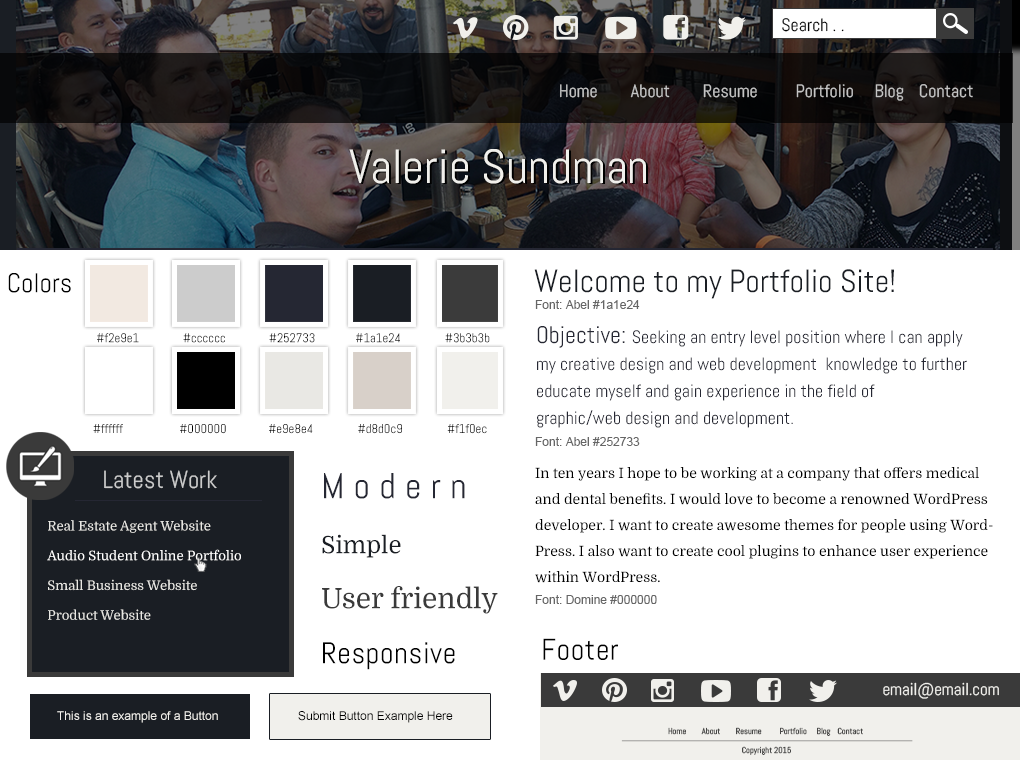
<style>
.page{position:relative;width:1020px;height:760px;background:#ffffff}
.page>*{position:absolute;margin:0}
.t1{font:18px "Abel-Regular";color:#010101}
.t2{font:18px "Abel-Regular";color:#cccccc}
.t3{font:48px "Abel-Regular";color:#f1f0ec}
.t4{font:32px "Abel-Regular";color:#1a1e24}
.t5{font:27.2px "Abel-Regular";color:#000000}
.t6{font:12px "ArialMT";color:#666666}
.t7{font:18px/27px "Abel-Regular";color:#252733}
.t8{font:24px/27px "Abel-Regular";color:#252733}
.t9{font:12.7px "Abel-Regular";color:#000000}
.t10{font:24.7px "Abel-Regular";color:#cccccc}
.t11{font:28px/55px "Domine-Regular";color:#3a3a3a}
.t12{font:36px/55px "Abel-Regular";letter-spacing:0.26em;color:#252733}
.t13{font:24px/55px "Domine-Regular";color:#1a1e24}
.t14{font:30px/55px "Abel-Regular";letter-spacing:0.02em;color:#000000}
.t15{font:14px/26px "Domine-Regular";color:#000000}
.t16{font:13.2px/14.8px "Domine-Regular";color:#e9e8e4}
.t17{font:13.2px/14.8px "Domine-Regular";color:#ffffff}
.t18{font:30px "Abel-Regular";letter-spacing:0.02em;color:#000000}
.t19{font:16.9px "Abel-Regular";color:#f1f0ec}
.t20{font:12px "ArialMT";color:#f1f0ec}
.t21{font:12px "ArialMT";color:#000000}
.t22{font:8.5px "Abel-Regular";color:#3a3a3a}
</style>
<div class="page">
<p class="t1" style="left:782px;top:18px;width:62px;height:14px">Search . . .</p>
<p class="t2" style="left:560px;top:84px;width:413px;height:17px;opacity:0.95">Home   About Resume      Portfolio     Blog Contact</p>
<p class="t3" style="left:349px;top:149px;width:297px;height:35px">Valerie Sundman</p>
<p class="t4" style="left:534px;top:269px;width:360px;height:30px">Welcome to my Portfolio Site!</p>
<p class="t5" style="left:8px;top:273px;width:63px;height:20px">Colors</p>
<p class="t6" style="left:535px;top:300px;width:105px;height:9px">Font: Abel #1a1e24</p>
<p class="t7" style="left:537px;top:326px;width:430px;height:102px"><span class="t8">Objective: </span>Seeking an entry level position where I can apply <br>my creative design and web development  knowledge to further <br>educate myself and gain experience in the field of <br>graphic/web design and development.</p>
<p class="t9" style="left:97px;top:333px;width:393px;height:10px">#f2e9e1  #cccccc         #252733    #1a1e24  #3b3b3b</p>
<p class="t9" style="left:93px;top:424px;width:394px;height:10px">#ffffff  #000000         #e9e8e4      #d8d0c9    #f1f0ec</p>
<p class="t6" style="left:535px;top:437px;width:105px;height:9px">Font: Abel #252733</p>
<p class="t10" style="left:104px;top:470px;width:113px;height:19px">Latest Work</p>
<p class="t11" style="left:322px;top:473px;width:176px;height:197px"><span class="t12">Modern<br></span><span class="t13">Simple<br></span>User friendly<br><span class="t14">Responsive</span></p>
<p class="t15" style="left:535px;top:467px;width:458px;height:116px">In ten years I hope to be working at a company that offers medical and dental benefits. I would love to become a renowned WordPress developer. I want to create awesome themes for people using WordPress. I also want to create cool plugins to enhance user experience within WordPress.</p>
<p class="t16" style="left:47px;top:520px;width:194px;height:100px">Real Estate Agent Website<br><span class="t17"><br>Audio Student Online Portfolio<br></span><br>Small Business Website<br><br>Product Website</p>
<p class="t6" style="left:535px;top:595px;width:122px;height:9px">Font: Domine #000000</p>
<p class="t18" style="left:543px;top:638px;width:75px;height:22px">Footer</p>
<p class="t19" style="left:883px;top:682px;width:116px;height:17px">email@email.com</p>
<p class="t20" style="left:57px;top:711px;width:161px;height:12px">This is an example of a Button</p>
<p class="t21" style="left:298px;top:711px;width:155px;height:12px">Submit Button Example Here</p>
<p class="t22" style="left:668px;top:727px;width:195px;height:9px;opacity:0.95">Home   About Resume      Portfolio     Blog Contact</p>
<p class="t22" style="left:742px;top:746px;width:49px;height:9px;opacity:0.95">Copyright 2015</p>
</div>
